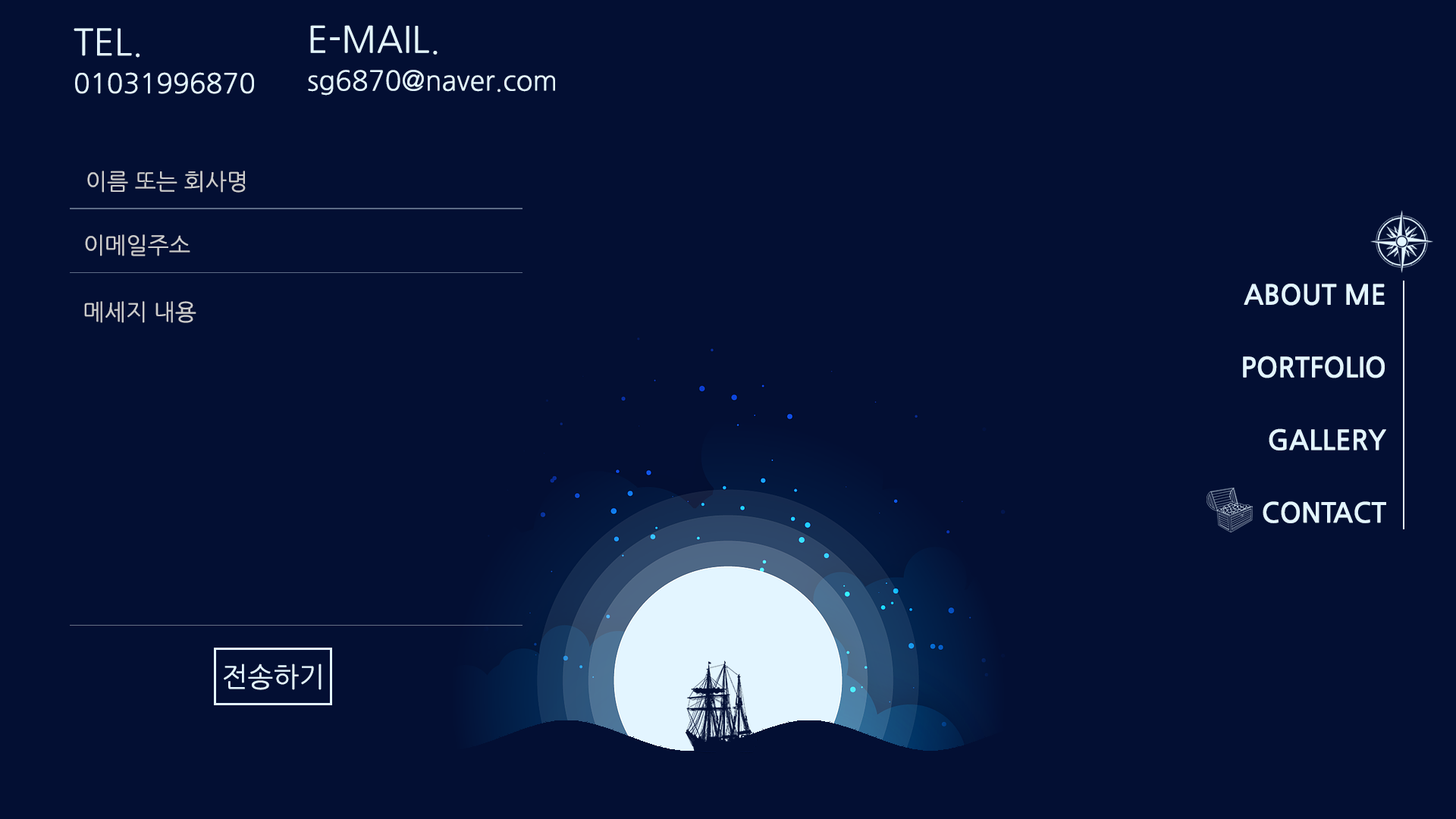
<style>
.page{position:relative;width:1456px;height:819px;background:#030f33}
.page>*{position:absolute;margin:0}
.t1{font:27.3px/45.5px "NanumGothic";color:#e3f5ff}
.t2{font:36.4px/45.5px "NanumGothic";color:#e3f5ff}
.t3{font:22.7px "NanumGothic";color:#cccccc}
.t4{font:27.3px/36.3px "NanumGothicBold";color:#e3f5ff}
.t5{font:27.3px "NanumGothic";color:#e3f5ff}
</style>
<div class="page">
<p class="t1" style="left:74px;top:28px;width:180px;height:66px"><span class="t2">TEL. <br></span>01031996870</p>
<p class="t1" style="left:308px;top:25px;width:247px;height:71px"><span class="t2">E-MAIL.<br></span>sg6870@naver.com</p>
<p class="t3" style="left:87px;top:171px;width:159px;height:22px">이름 또는 회사명</p>
<p class="t3" style="left:85px;top:234px;width:105px;height:22px">이메일주소</p>
<p class="t4" style="left:1243px;top:284px;width:143px;height:239px;text-align:right">ABOUT ME<br><br>PORTFOLIO<br><br>GALLERY<br><br>CONTACT</p>
<p class="t3" style="left:84px;top:301px;width:112px;height:22px">메세지 내용</p>
<p class="t5" style="left:224px;top:664px;width:98px;height:26px">전송하기</p>
</div>
